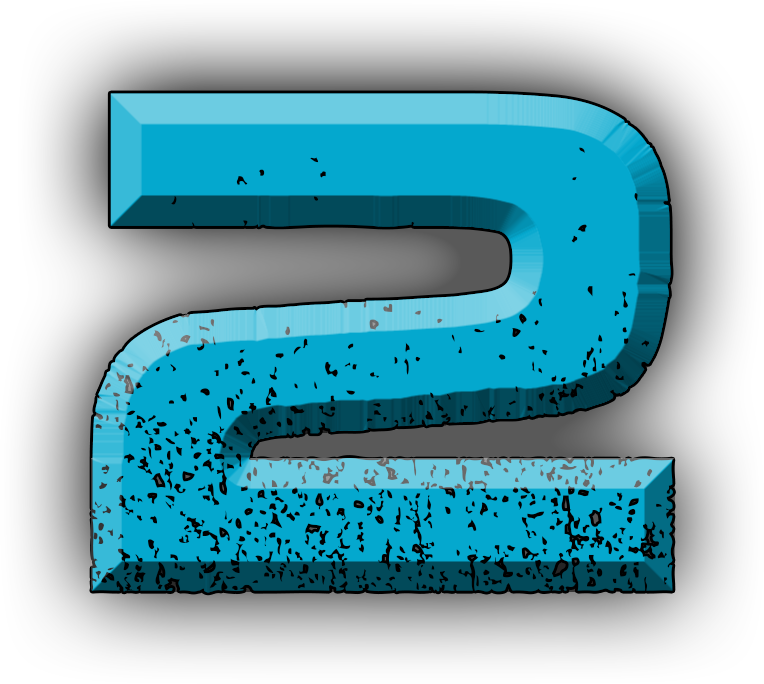
<style>
.page{position:relative;width:764px;height:684px}
.page>*{position:absolute;margin:0}
.t1{font:700px "Coalition"}
</style>
<div class="page">
<p class="t1" style="left:92px;top:93px;width:581px;height:500px">2</p>
</div>
